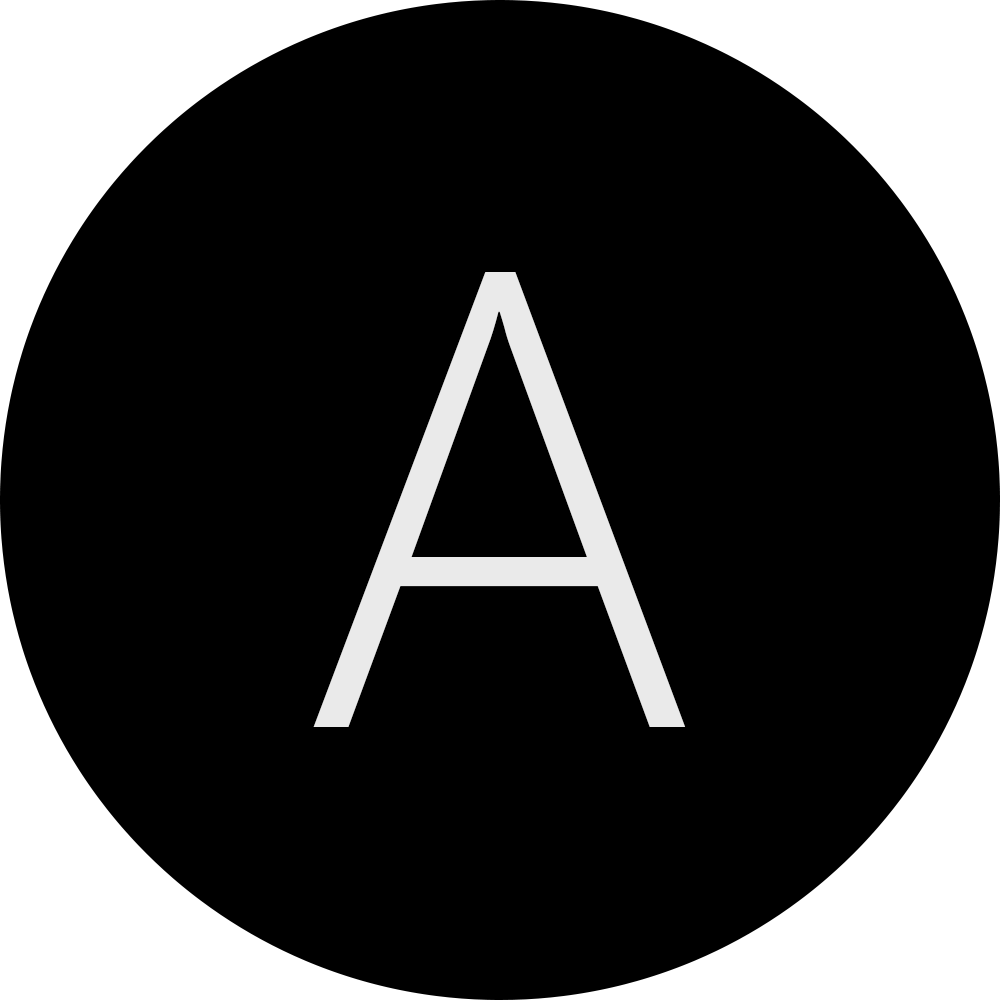
<style>
.page{position:relative;width:1000px;height:1000px;background:#000000}
.page>*{position:absolute;margin:0}
.t1{font:650.1px "SegoeUI-Light";color:#eaeaea}
</style>
<div class="page">
<p class="t1" style="left:313px;top:272px;width:373px;height:455px">A</p>
</div>
